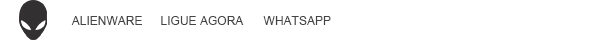
<style>
.page{position:relative;width:600px;height:40px;background:#ffffff}
.page>*{position:absolute;margin:0}
.t1{font:12px "ArialMT";color:#444444;text-transform:uppercase}
</style>
<div class="page">
<p class="t1" style="left:71px;top:16px;width:71px;height:9px">ALIENWARE</p>
<p class="t1" style="left:161px;top:16px;width:83px;height:9px">LIGUE AGORA</p>
<p class="t1" style="left:263px;top:16px;width:68px;height:9px">WHATSAPP</p>
</div>
